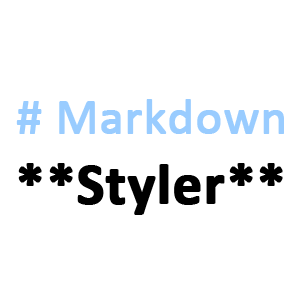
<style>
.page{position:relative;width:300px;height:300px;background:#ffffff}
.page>*{position:absolute;margin:0}
.t1{font:50px "Calibri";color:#99ccff;font-weight:bold}
.t2{font:58.3px "Calibri-Bold";color:#000000;font-weight:bold}
</style>
<div class="page">
<p class="t1" style="left:16px;top:99px;width:268px;height:35px"># Markdown</p>
<p class="t2" style="left:18px;top:163px;width:265px;height:52px">**Styler**</p>
</div>
